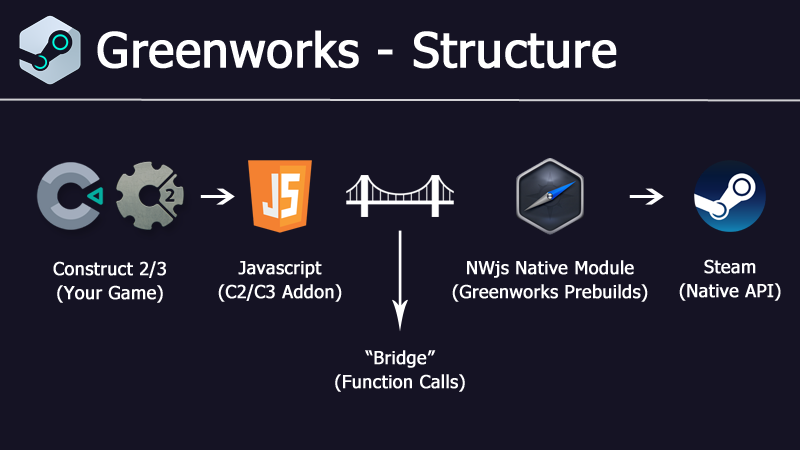
<style>
.page{position:relative;width:800px;height:450px;background:#151324}
.page>*{position:absolute;margin:0}
.t1{font:48px "Tahoma";color:#ffffff;font-weight:bold}
.t2{font:18px/24px "Tahoma";color:#ffffff;font-weight:bold}
</style>
<div class="page">
<p class="t1" style="left:97px;top:30px;width:520px;height:39px">Greenworks - Structure</p>
<p class="t2" style="left:53px;top:261px;width:113px;height:42px;text-align:center">Construct 2/3<br>(Your Game)</p>
<p class="t2" style="left:218px;top:261px;width:124px;height:41px;text-align:center">Javascript<br>(C2/C3 Addon)</p>
<p class="t2" style="left:452px;top:260px;width:196px;height:42px;text-align:center">NWjs Native Module<br>(Greenworks Prebuilds)</p>
<p class="t2" style="left:679px;top:259px;width:102px;height:42px;text-align:center">Steam<br>(Native API)</p>
<p class="t2" style="left:335px;top:350px;width:130px;height:42px;text-align:center">“Bridge”<br>(Function Calls)</p>
</div>
